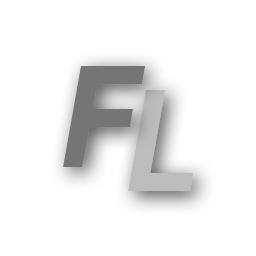
<style>
.page{position:relative;width:256px;height:256px;background:#ffffff}
.page>*{position:absolute;margin:0}
.t1{font:141.2px "ProductSans-BoldItalic";letter-spacing:-0.22em;color:#757575}
.t2{font:141.2px "ProductSans-BoldItalic";letter-spacing:-0.22em;color:#bdbdbd}
</style>
<div class="page">
<p class="t1" style="left:63px;top:66px;width:83px;height:101px">F</p>
<p class="t2" style="left:128px;top:90px;width:66px;height:101px">L</p>
</div>
